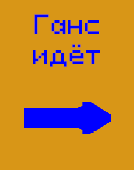
<style>
.page{position:relative;width:134px;height:170px;background:#d89617}
.page>*{position:absolute;margin:0}
.t1{font:25px "PixeloidSans";letter-spacing:0.005em;color:#0000ff}
</style>
<div class="page">
<p class="t1" style="left:33px;top:14px;width:67px;height:53px;text-align:center">Ганс<br>идёт</p>
</div>
